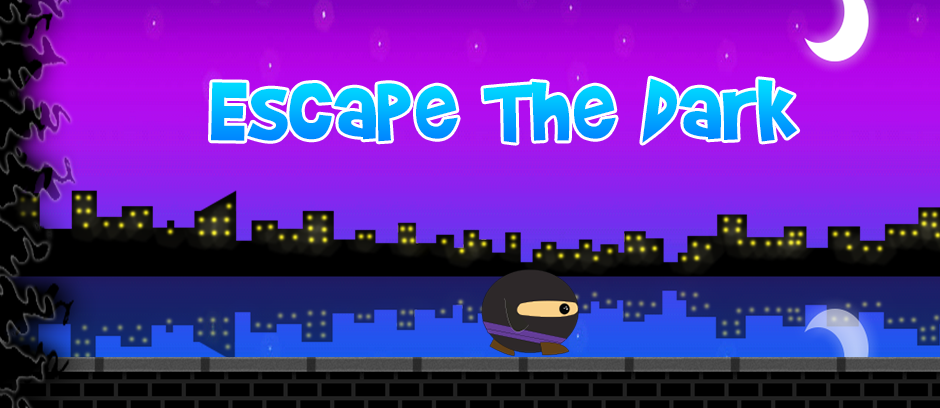
<style>
.page{position:relative;width:940px;height:408px}
.page>*{position:absolute;margin:0}
.t1{font:99.1px "BradyBunchRemastered"}
</style>
<div class="page">
<p class="t1" style="left:211px;top:78px;width:587px;height:65px">Escape The Dark</p>
</div>
